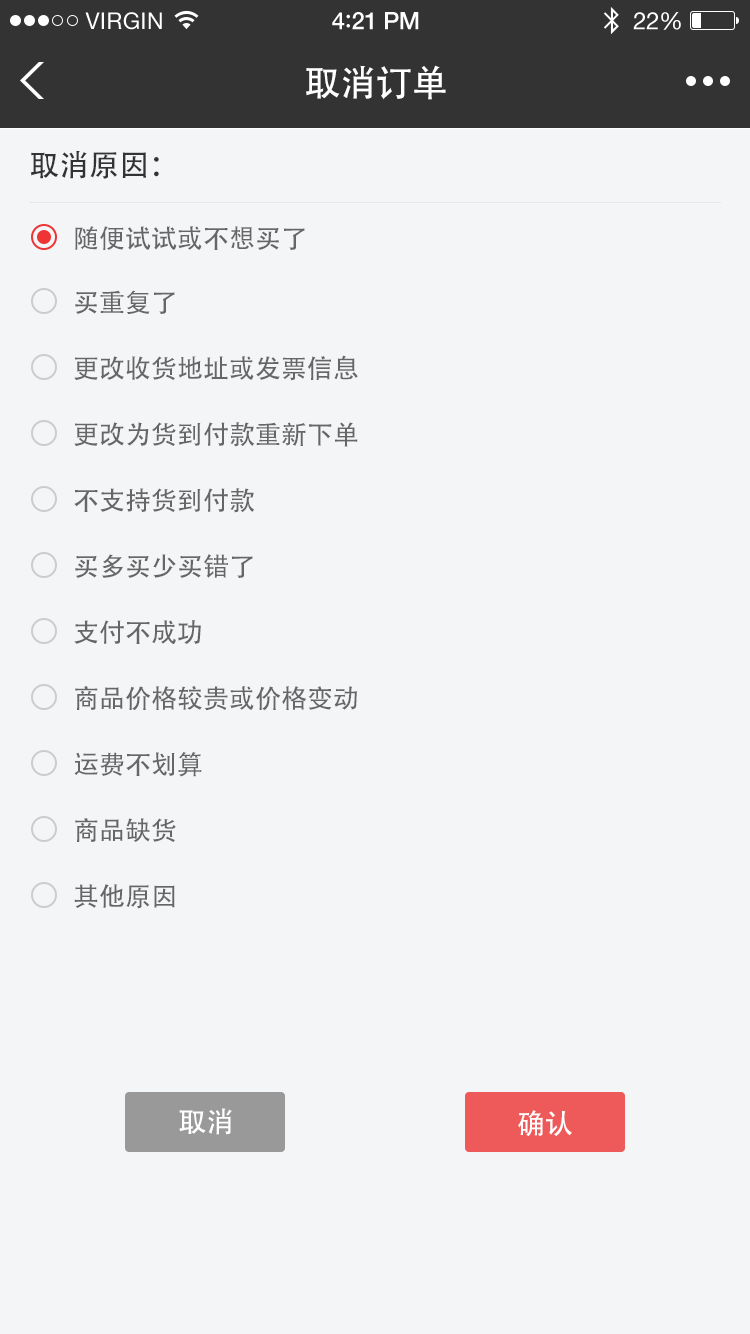
<style>
.page{position:relative;width:750px;height:1334px;background:#f3f5f7}
.page>*{position:absolute;margin:0}
.t1{font:36px "AdobeHeitiStd-Regular";color:#ffffff}
.t2{font:30px "AdobeHeitiStd-Regular";color:#333333}
.t3{font:26px "AdobeHeitiStd-Regular";color:#666666}
.t4{font:28px "AdobeHeitiStd-Regular";color:#ffffff}
</style>
<div class="page">
<p class="t1" style="left:306px;top:65px;width:140px;height:35px">取消订单</p>
<p class="t2" style="left:30px;top:151px;width:129px;height:28px">取消原因：</p>
<p class="t3" style="left:75px;top:226px;width:230px;height:24px">随便试试或不想买了</p>
<p class="t3" style="left:75px;top:290px;width:100px;height:24px">买重复了</p>
<p class="t3" style="left:74px;top:355px;width:284px;height:26px">更改收货地址或发票信息</p>
<p class="t3" style="left:74px;top:422px;width:284px;height:25px">更改为货到付款重新下单</p>
<p class="t3" style="left:74px;top:488px;width:181px;height:25px">不支持货到付款</p>
<p class="t3" style="left:75px;top:554px;width:178px;height:24px">买多买少买错了</p>
<p class="t3" style="left:74px;top:620px;width:127px;height:25px">支付不成功</p>
<p class="t3" style="left:75px;top:686px;width:283px;height:25px">商品价格较贵或价格变动</p>
<p class="t3" style="left:74px;top:752px;width:128px;height:25px">运费不划算</p>
<p class="t3" style="left:75px;top:818px;width:101px;height:24px">商品缺货</p>
<p class="t3" style="left:74px;top:884px;width:101px;height:25px">其他原因</p>
<p class="t4" style="left:179px;top:1108px;width:53px;height:27px">取消</p>
<p class="t4" style="left:518px;top:1110px;width:54px;height:26px">确认</p>
</div>
